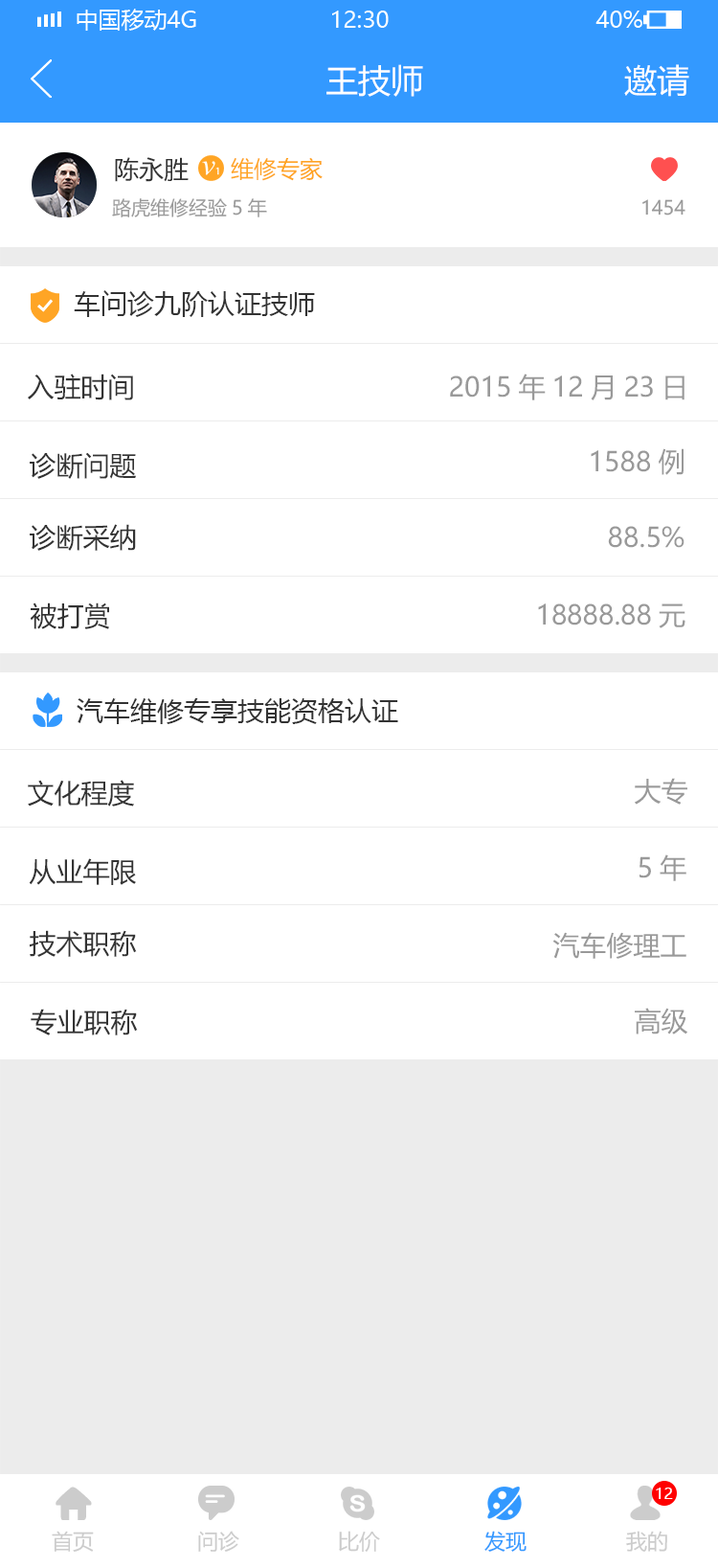
<style>
.page{position:relative;width:718px;height:1568px;background:#ffffff}
.page>*{position:absolute;margin:0}
.t1{font:32.6px "MicrosoftYaHei";color:#ffffff}
.t2{font:24.9px "MicrosoftYaHei";color:#333333}
.t3{font:23px "MicrosoftYaHei";color:#ffa525}
.t4{font:19.2px "MicrosoftYaHei";color:#999999}
.t5{font:26.8px "MicrosoftYaHei";color:#333333}
.t6{font:26.8px "MicrosoftYaHei";color:#999999}
.t7{font:15.3px "MicrosoftYaHei";color:#ffffff}
.t8{font:21.1px "MicrosoftYaHei";color:#cccccc}
.t9{font:21.1px "MicrosoftYaHei";color:#3399ff}
</style>
<div class="page">
<p class="t1" style="left:327px;top:64px;width:96px;height:33px">王技师</p>
<p class="t1" style="left:625px;top:64px;width:65px;height:33px">邀请</p>
<p class="t2" style="left:115px;top:157px;width:74px;height:25px">陈永胜</p>
<p class="t3" style="left:231px;top:157px;width:92px;height:24px">维修专家</p>
<p class="t4" style="left:112px;top:198px;width:155px;height:19px">路虎维修经验5年</p>
<p class="t4" style="left:643px;top:199px;width:43px;height:17px">1454</p>
<p class="t5" style="left:74px;top:290px;width:241px;height:27px">车问诊九阶认证技师</p>
<p class="t5" style="left:28px;top:374px;width:105px;height:26px">入驻时间</p>
<p class="t6" style="left:450px;top:374px;width:235px;height:26px">2015年12月23日</p>
<p class="t6" style="left:591px;top:448px;width:93px;height:27px">1588例</p>
<p class="t5" style="left:30px;top:452px;width:106px;height:27px">诊断问题</p>
<p class="t5" style="left:30px;top:524px;width:106px;height:27px">诊断采纳</p>
<p class="t6" style="left:608px;top:526px;width:77px;height:22px">88.5%</p>
<p class="t5" style="left:31px;top:602px;width:78px;height:27px">被打赏</p>
<p class="t6" style="left:538px;top:603px;width:148px;height:25px">18888.88元</p>
<p class="t5" style="left:77px;top:698px;width:321px;height:26px">汽车维修专享技能资格认证</p>
<p class="t5" style="left:28px;top:780px;width:106px;height:27px">文化程度</p>
<p class="t6" style="left:635px;top:778px;width:53px;height:27px">大专</p>
<p class="t6" style="left:640px;top:854px;width:47px;height:27px">5年</p>
<p class="t5" style="left:29px;top:858px;width:107px;height:27px">从业年限</p>
<p class="t5" style="left:29px;top:930px;width:108px;height:27px">技术职称</p>
<p class="t6" style="left:553px;top:932px;width:134px;height:27px">汽车修理工</p>
<p class="t5" style="left:31px;top:1009px;width:107px;height:26px">专业职称</p>
<p class="t6" style="left:635px;top:1008px;width:53px;height:26px">高级</p>
<p class="t7" style="left:656px;top:1488px;width:17px;height:11px">12</p>
<p class="t8" style="left:52px;top:1531px;width:42px;height:21px">首页</p>
<p class="t8" style="left:198px;top:1531px;width:41px;height:21px">问诊</p>
<p class="t8" style="left:339px;top:1531px;width:41px;height:21px">比价</p>
<p class="t9" style="left:485px;top:1531px;width:42px;height:21px">发现</p>
<p class="t8" style="left:626px;top:1531px;width:42px;height:21px">我的</p>
</div>
